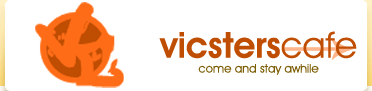
<style>
.page{position:relative;width:372px;height:91px;background:#ffffff}
.page>*{position:absolute;margin:0}
.t1{font:36px "AvantGardeITCbyBT-Demi";color:#bf4d02}
.t2{font:36px "AvantGardeITCbyBT-Book";color:#bf4d02}
.t3{font:12px "AvantGardeITCbyBT-Book";color:#7b5c02}
</style>
<div class="page">
<p class="t1" style="left:159px;top:31px;width:198px;height:28px">vicsters<span class="t2">cafe</span></p>
<p class="t3" style="left:198px;top:64px;width:121px;height:11px">come and stay awhile</p>
</div>
